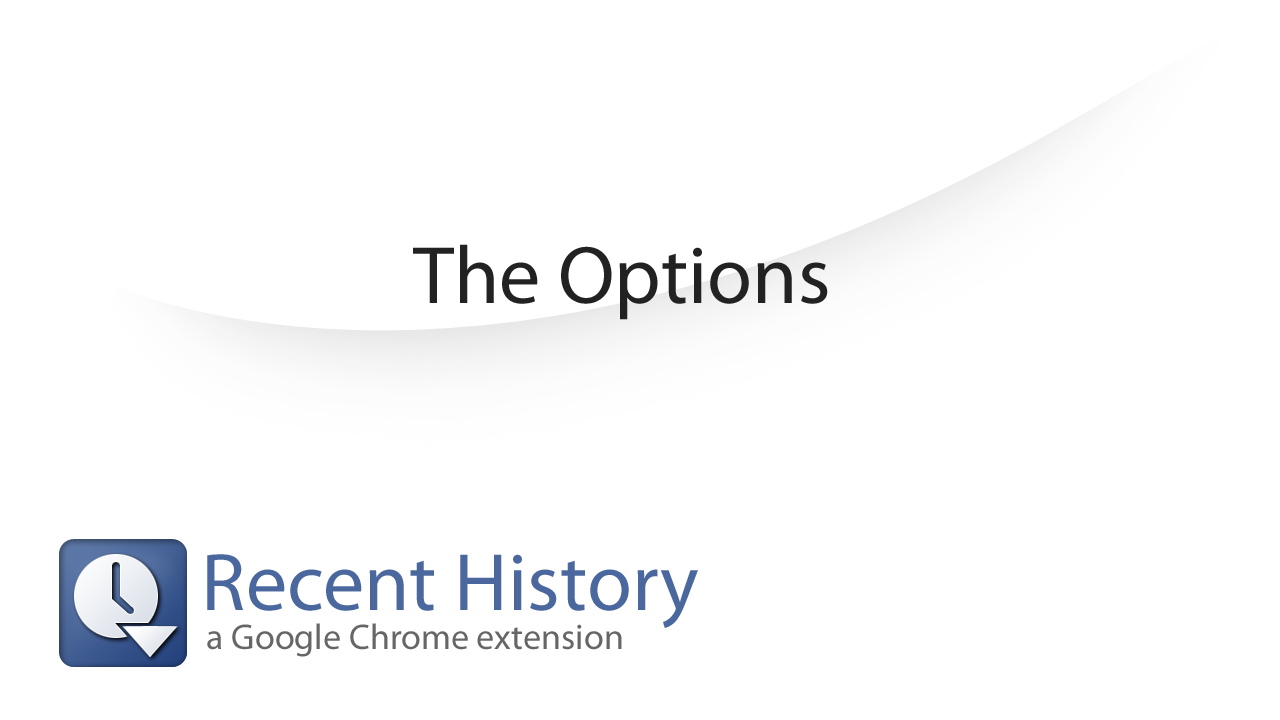
<style>
.page{position:relative;width:1280px;height:720px;background:#ffffff}
.page>*{position:absolute;margin:0}
.t1{font:82px "MyriadPro-Regular";color:#222222}
.t2{font:82px "MyriadPro-Regular";color:#4a689e}
.t3{font:36px "MyriadPro-Regular";color:#666666}
</style>
<div class="page">
<p class="t1" style="left:413px;top:244px;width:415px;height:76px">The Options</p>
<p class="t2" style="left:207px;top:554px;width:491px;height:74px">Recent History</p>
<p class="t3" style="left:207px;top:623px;width:415px;height:34px">a Google Chrome extension</p>
</div>
